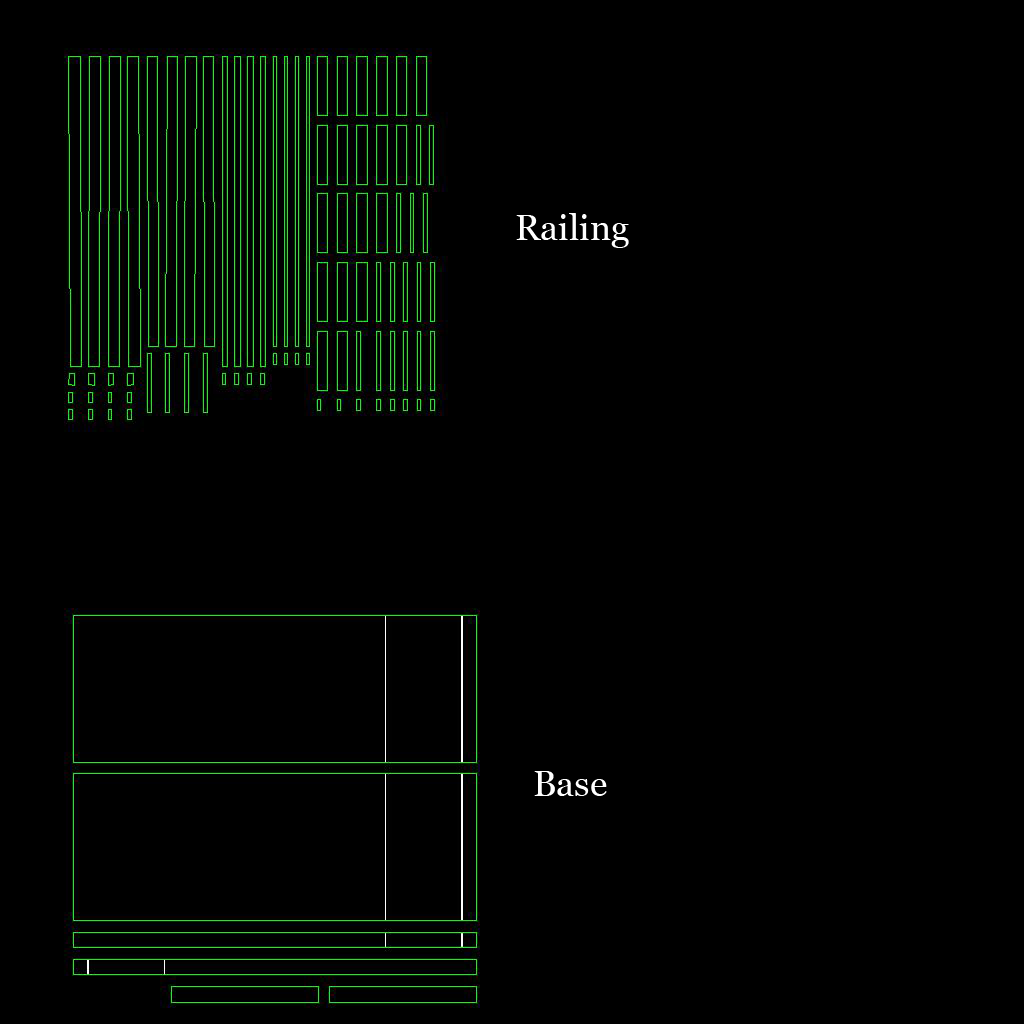
<style>
.page{position:relative;width:1024px;height:1024px;background:#000000}
.page>*{position:absolute;margin:0}
.t1{font:36px "Georgia";color:#ffffff}
</style>
<div class="page">
<p class="t1" style="left:516px;top:213px;width:113px;height:35px">Railing</p>
<p class="t1" style="left:534px;top:771px;width:73px;height:25px">Base</p>
</div>
